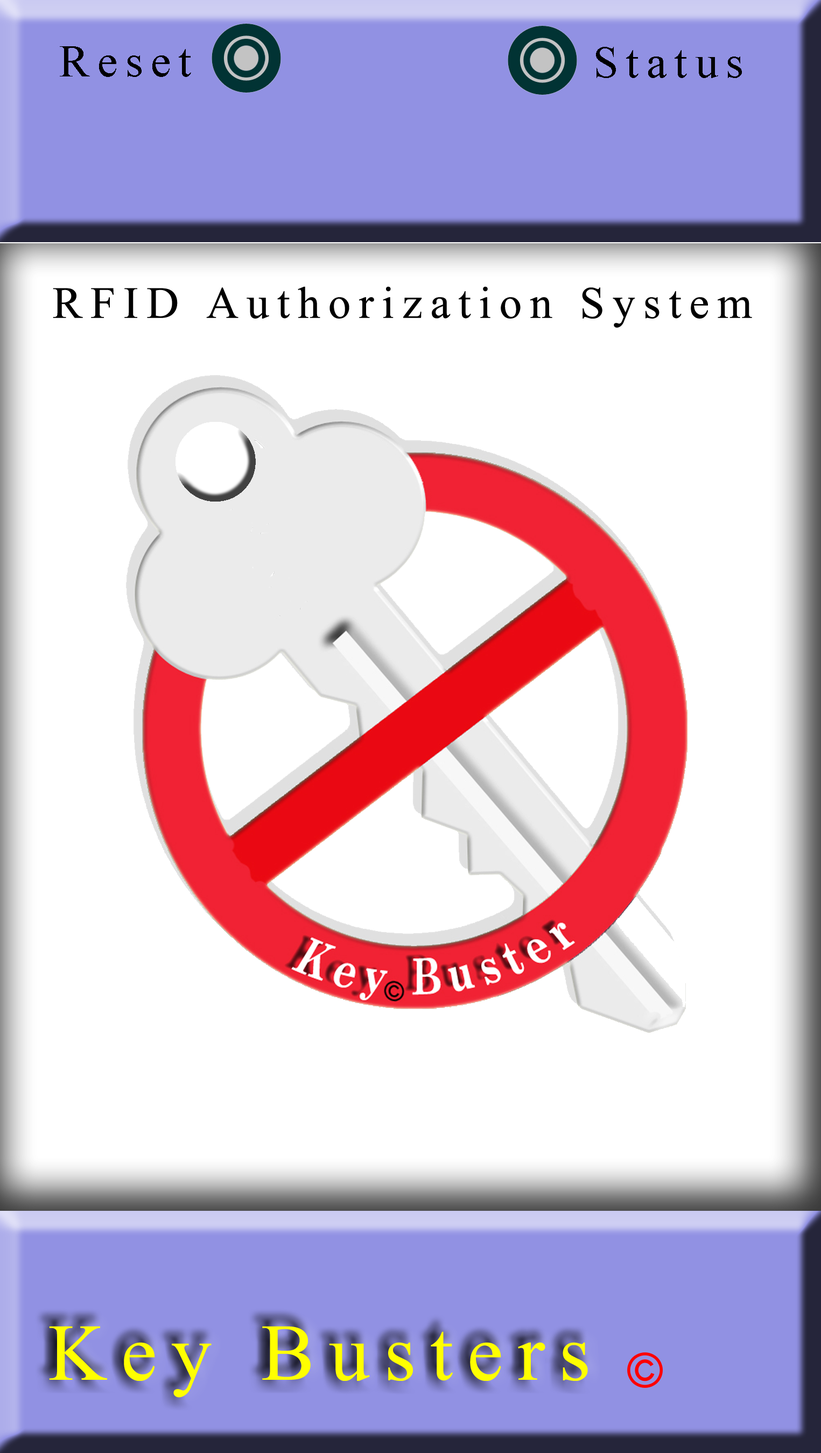
<style>
.page{position:relative;width:821px;height:1453px;background:#ffffff}
.page>*{position:absolute;margin:0}
.t1{font:44.8px "TimesNewRomanPSMT";letter-spacing:0.18em;color:#000000}
.t2{font:80.7px "TimesNewRomanPSMT";letter-spacing:0.18em;color:#ffff00}
</style>
<div class="page">
<p class="t1" style="left:60px;top:46px;width:131px;height:31px">Reset</p>
<p class="t1" style="left:596px;top:47px;width:146px;height:31px">Status</p>
<p class="t1" style="left:53px;top:286px;width:699px;height:42px">RFID Authorization System</p>
<p class="t2" style="left:49px;top:1326px;width:539px;height:72px">Key Busters</p>
</div>
